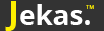
<style>
.page{position:relative;width:104px;height:31px;background:#333333}
.page>*{position:absolute;margin:0}
.t1{font:27.8px "OpenSans-Bold";color:#ffffff}
.t2{font:33.3px "OpenSans-Bold";color:#fff000}
.t3{font:5.6px "ArialMT";color:#fff000}
</style>
<div class="page">
<p class="t1" style="left:5px;top:1px;width:85px;height:30px"><span class="t2">J</span>ekas.</p>
<p class="t3" style="left:86px;top:5px;width:8px;height:4px">TM</p>
</div>
